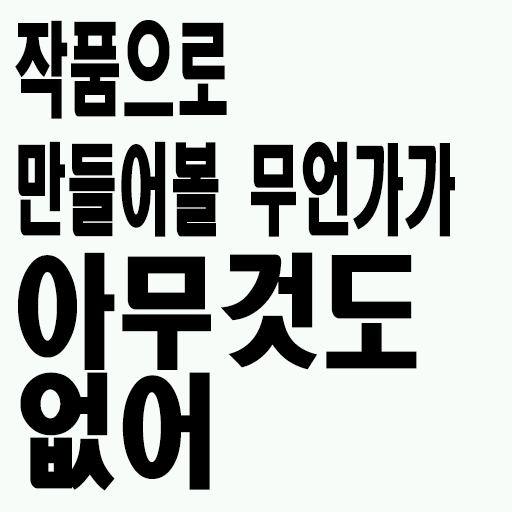
<style>
.page{position:relative;width:512px;height:512px;background:#f8fcf8}
.page>*{position:absolute;margin:0}
.t1{font:98.8px/120px "HeadlineR-HM";color:#000000;scale:0.53 1}
.t2{font:102.6px/120px "HeadlineR-HM";color:#000000;scale:0.53 1}
.t3{font:121.6px/120px "HeadlineR-HM";color:#000000;scale:0.84 1}
</style>
<div class="page">
<p class="t1" style="left:15px;top:20px;width:440px;height:471px"><span class="t2">작품으로<br></span>만들어볼 무언가가<br><span class="t3">아무것도<br>없어</span></p>
</div>
